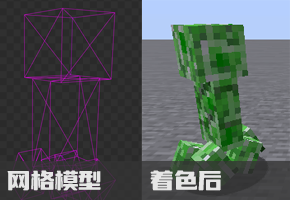
<style>
.page{position:relative;width:290px;height:200px}
.page>*{position:absolute;margin:0}
.t1{font:27.3px "YouSheBiaoTiYuan";letter-spacing:-0.05em;color:#e6e6e6}
</style>
<div class="page">
<p class="t1" style="left:7px;top:170px;width:94px;height:21px">网格模型</p>
<p class="t1" style="left:150px;top:170px;width:71px;height:21px">着色后</p>
</div>
